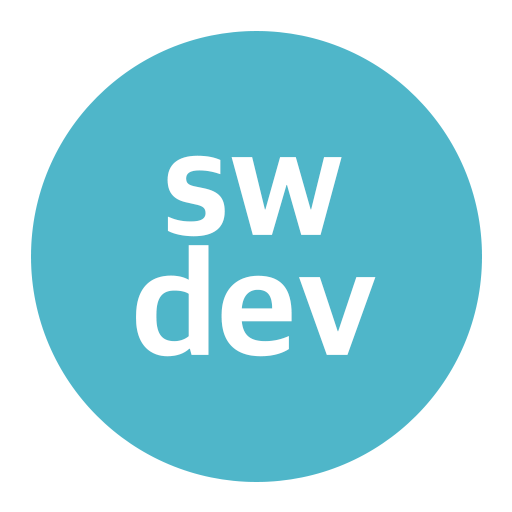
<style>
.page{position:relative;width:512px;height:512px;background:#4fb6c9}
.page>*{position:absolute;margin:0}
.t1{font:150px/120px "AppleSDGothicNeo-ExtraBold";color:#ffffff}
</style>
<div class="page">
<p class="t1" style="left:136px;top:155px;width:240px;height:202px;text-align:center">sw<br>dev</p>
</div>
